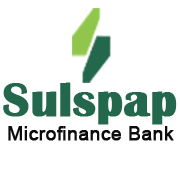
<style>
.page{position:relative;width:180px;height:180px;background:#ffffff}
.page>*{position:absolute;margin:0}
.t1{font:49px "BritannicBold";color:#23674c;font-weight:bold}
.t2{font:18.6px "ArialMT";color:#0c0c0c;font-weight:bold;scale:1.04 1}
</style>
<div class="page">
<p class="t1" style="left:3px;top:82px;width:174px;height:43px">Sulspap</p>
<p class="t2" style="left:8px;top:126px;width:166px;height:15px">Microfinance Bank</p>
</div>
